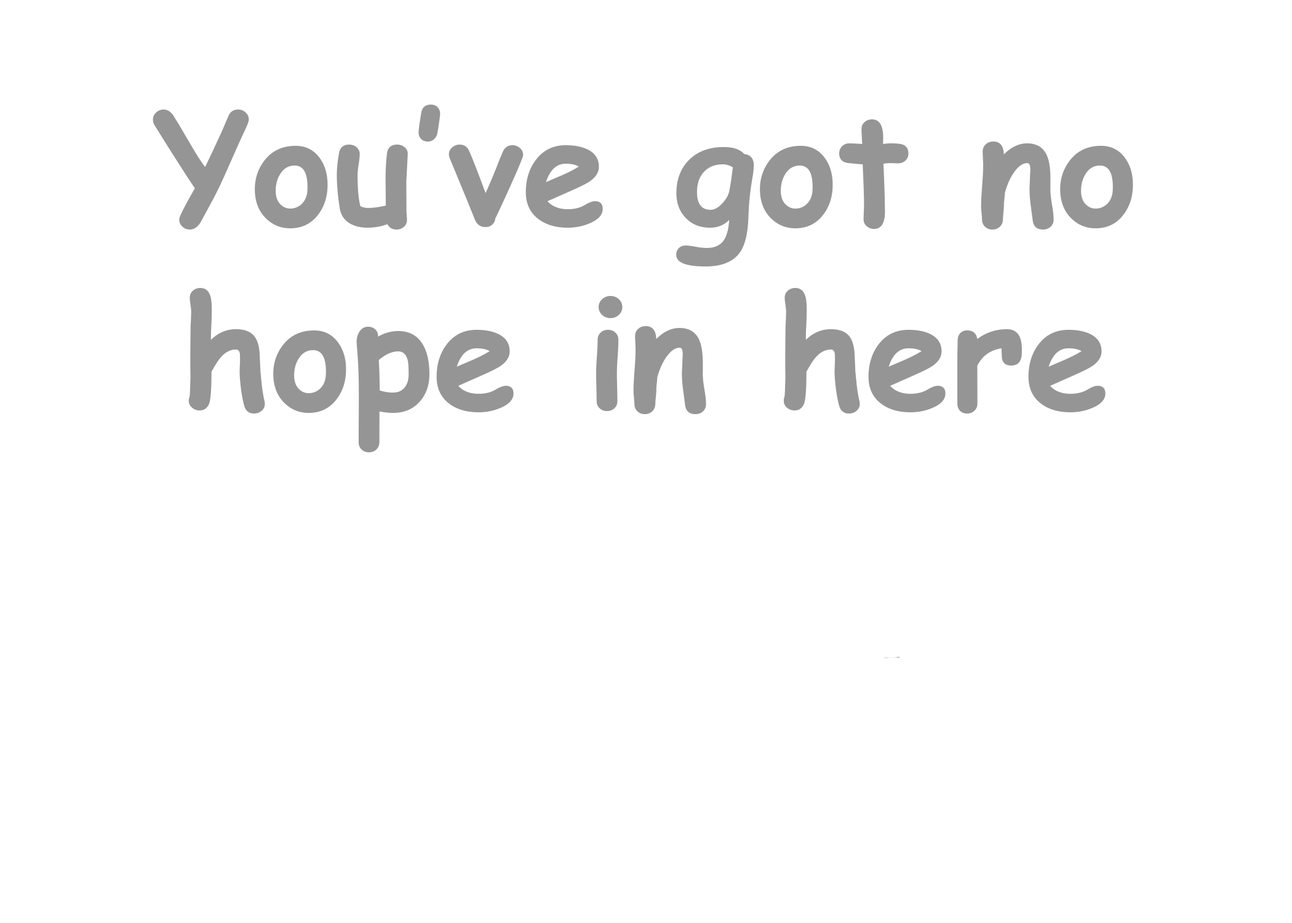
<style>
.page{position:relative;width:1292px;height:923px;background:#ffffff}
.page>*{position:absolute;margin:0}
.t1{font:153.8px "ComicSansMS-Bold";color:#959595}
</style>
<div class="page">
<p class="t1" style="left:153px;top:105px;width:980px;height:347px;text-align:center">You’ve got no hope in here</p>
</div>
